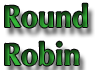
<style>
.page{position:relative;width:95px;height:70px;background:#ffffff}
.page>*{position:absolute;margin:0}
.t1{font:31px "Optima-Bold"}
</style>
<div class="page">
<p class="t1" style="left:5px;top:3px;width:83px;height:63px">Round <br>Robin</p>
</div>
